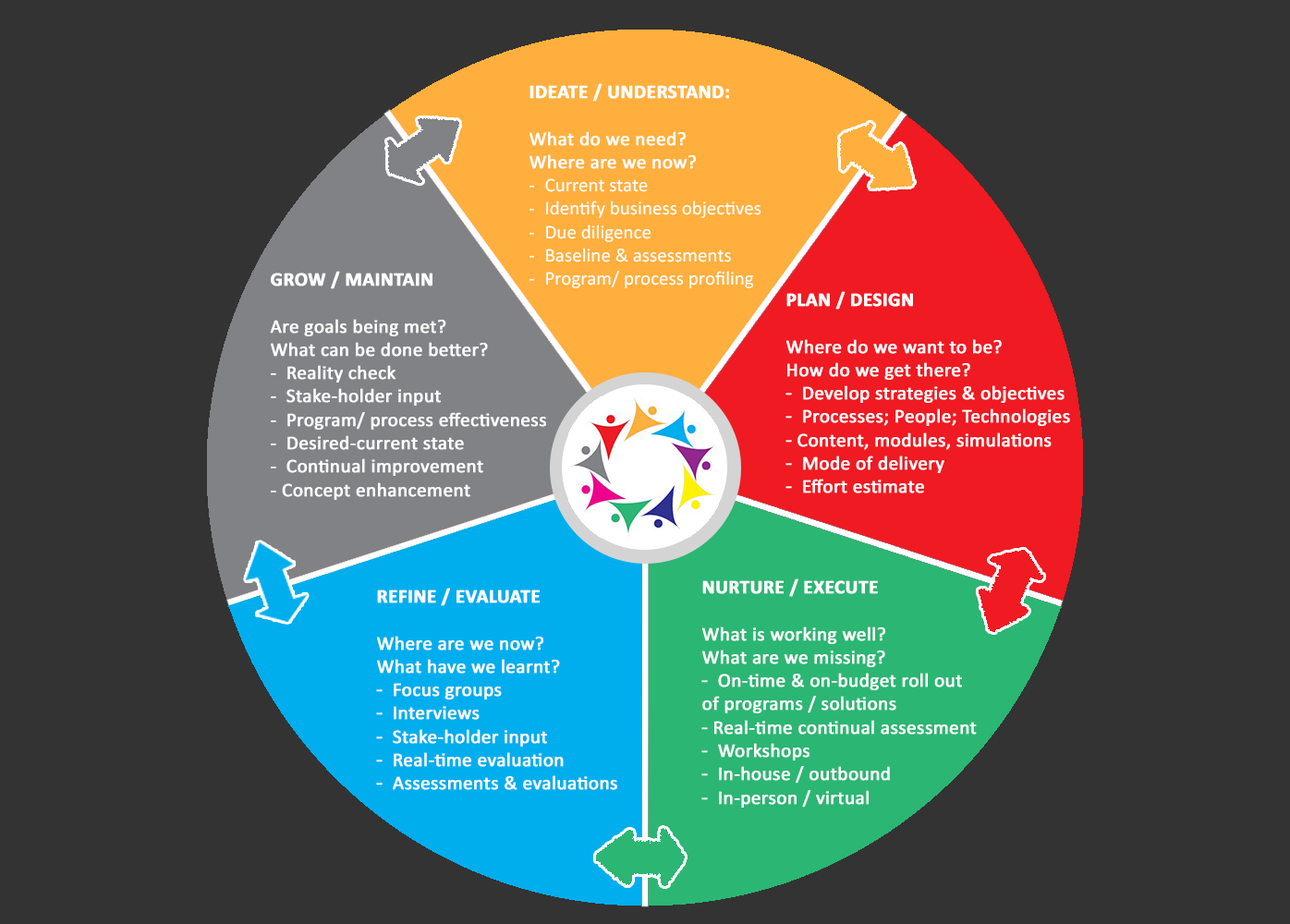
<style>
.page{position:relative;width:1290px;height:924px;background:#333333}
.page>*{position:absolute;margin:0}
.t1{font:19.5px "Calibri";color:#ffffff}
.t2{font:19.5px "Calibri-Bold";color:#ffffff;font-weight:bold}
.t3{font:19.5px "Calibri";color:#ffffff;font-weight:bold}
.t4{font:19.5px "MyriadPro-Regular";color:#ffffff;font-weight:bold}
</style>
<div class="page">
<p class="t1" style="left:530px;top:83px;width:232px;height:205px"><span class="t2">IDEATE / UNDERSTAND:<br></span><span class="t3"> <br>What do we need?<br>Where are we now?<br></span>- Current state<br>- Identify business objectives<br>- Due diligence<br>- Baseline &amp; assessments<br>- Program/ process profiling</p>
<p class="t3" style="left:270px;top:271px;width:276px;height:229px"><span class="t2">GROW / MAINTAIN<br><br></span>Are goals being met?<br>What can be done better?<br>- Reality check<br>- Stake-holder input  <br>- Program/ process effectiveness<br>- Desired-current state<br>- Continual improvement<br>- Concept enhancement</p>
<p class="t3" style="left:786px;top:291px;width:284px;height:203px"><span class="t2">PLAN / DESIGN<br></span><br>Where do we want to be?<br>How do we get there?<br><span class="t4">-</span> Develop strategies &amp; objectives<br><span class="t4">-</span> Processes; People; Technologies <br><span class="t4">- </span>Content, modules, simulations<br><span class="t4">-</span> Mode of delivery<br><span class="t4">-</span> Effort estimate</p>
<p class="t3" style="left:701px;top:579px;width:276px;height:229px"><span class="t2">NURTURE / EXECUTE<br><br></span>What is working well?<br>What are we missing?<br><span class="t4">-</span> On-time &amp; on-budget roll out<br>of programs / solutions<br><span class="t4">- </span>Real-time continual assessment <br><span class="t4">-</span> Workshops<br><span class="t4">-</span> In-house / outbound<br><span class="t4">-</span> In-person / virtual</p>
<p class="t3" style="left:376px;top:588px;width:241px;height:202px"><span class="t2">REFINE / EVALUATE<br><br></span>Where are we now?<br>What have we learnt?<br><span class="t4">-</span> Focus groups<br><span class="t4">-</span> Interviews<br><span class="t4">-</span> Stake-holder input<br><span class="t4">-</span> Real-time evaluation<br><span class="t4">-</span> Assessments &amp; evaluations</p>
</div>
